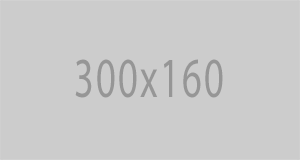
<style>
.page{position:relative;width:300px;height:160px;background:#cccccc}
.page>*{position:absolute;margin:0}
.t1{font:57px "MyriadPro-Regular";letter-spacing:0.07em;color:#969696;scale:0.68 1}
</style>
<div class="page">
<p class="t1" style="left:75px;top:59px;width:148px;height:39px">300x160</p>
</div>
